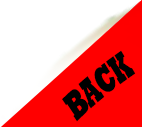
<style>
.page{position:relative;width:142px;height:127px;background:#ffffff}
.page>*{position:absolute;margin:0}
.t1{font:38.8px "Rockwell-ExtraBold";color:#000000;scale:0.56 1}
</style>
<div class="page">
<p class="t1" style="left:62px;top:50px;width:74px;height:72px;rotate:-39deg">BACK</p>
</div>
